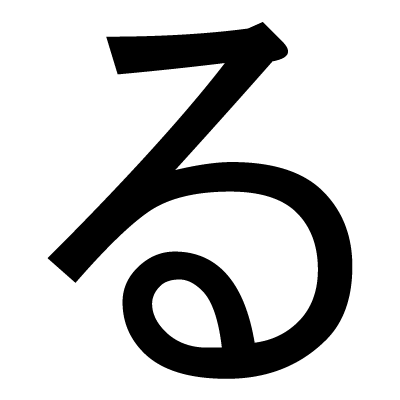
<style>
.page{position:relative;width:400px;height:400px;background:#ffffff}
.page>*{position:absolute;margin:0}
.t1{font:416.7px "MS-PGothic";color:#000000}
</style>
<div class="page">
<p class="t1" style="left:47px;top:22px;width:306px;height:357px">る</p>
</div>
